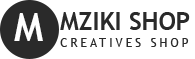
<style>
.page{position:relative;width:195px;height:59px;background:#ffffff}
.page>*{position:absolute;margin:0}
.t1{font:38.7px "TrebuchetMS-Bold";color:#ffffff}
.t2{font:24.7px "TrebuchetMS-Bold";color:#2a2a2a}
.t3{font:12.3px "TrebuchetMS";letter-spacing:0.24em;color:#2a2a2a}
</style>
<div class="page">
<p class="t1" style="left:14px;top:13px;width:29px;height:28px">M</p>
<p class="t2" style="left:60px;top:12px;width:130px;height:18px">MZIKI SHOP</p>
<p class="t3" style="left:60px;top:38px;width:129px;height:9px">CREATIVES SHOP</p>
</div>
